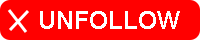
<style>
.page{position:relative;width:200px;height:40px;background:#ff0000}
.page>*{position:absolute;margin:0}
.t1{font:25px "Arial-BoldMT";color:#ffffff}
</style>
<div class="page">
<p class="t1" style="left:40px;top:11px;width:140px;height:18px">UNFOLLOW</p>
</div>
